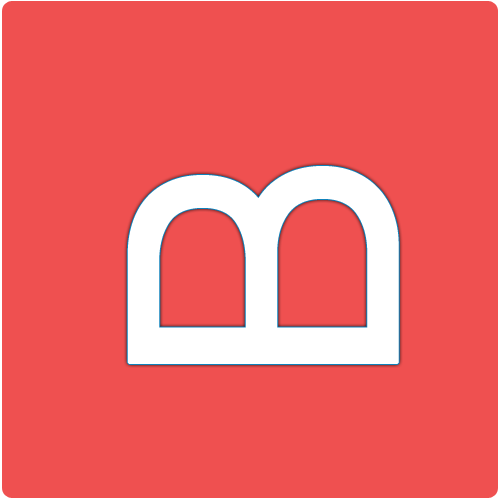
<style>
.page{position:relative;width:500px;height:500px;background:#ef5050}
.page>*{position:absolute;margin:0}
.t1{font:368px "SansSerif";color:#ffffff;font-weight:bold;scale:0.96 1}
</style>
<div class="page">
<p class="t1" style="left:127px;top:166px;width:272px;height:198px;rotate:-90deg">B</p>
</div>
